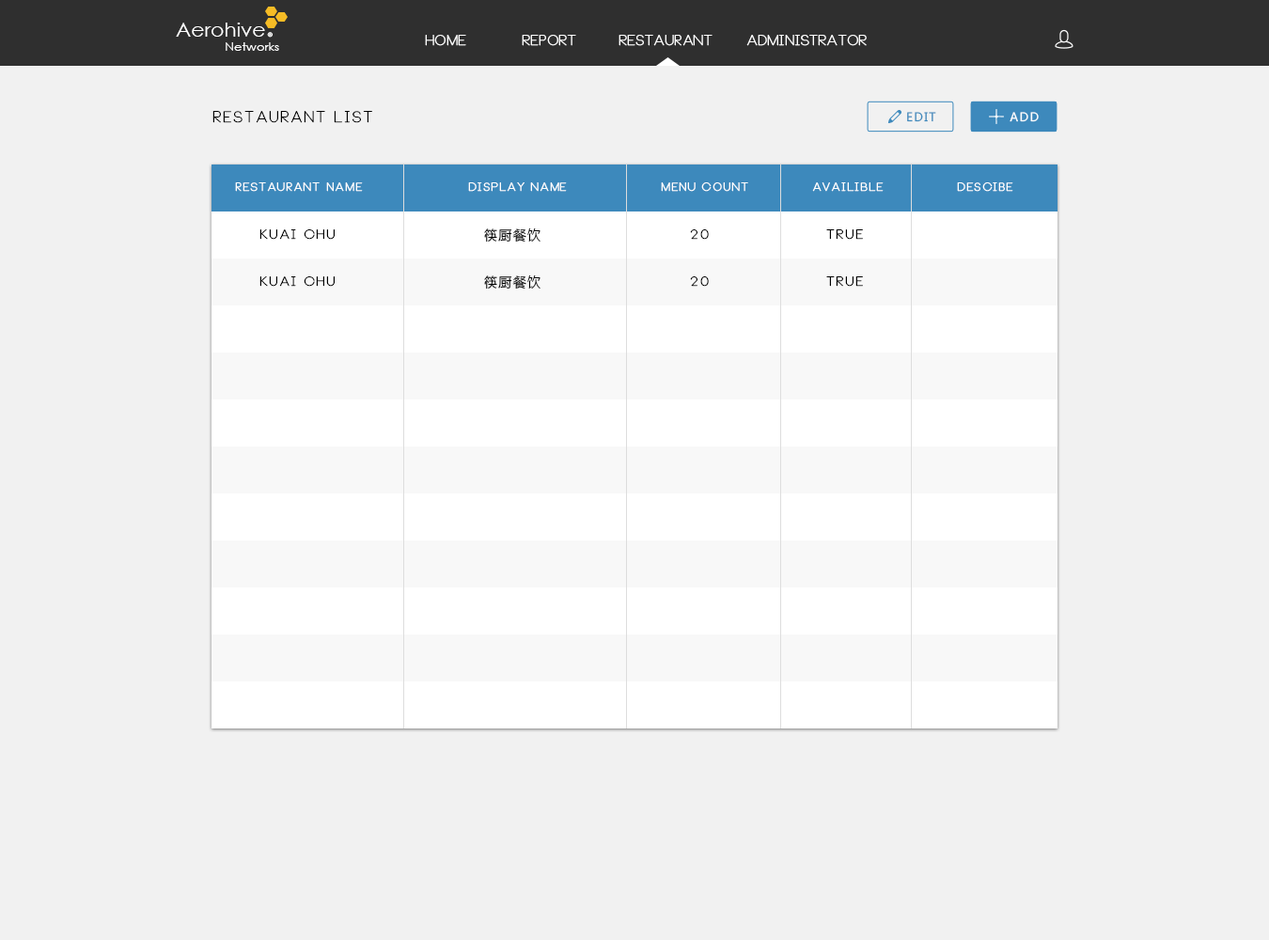
<style>
.page{position:relative;width:1269px;height:940px;background:#f1f1f1}
.page>*{position:absolute;margin:0}
.t1{font:19.3px "CenturyGothic";color:#ffffff;scale:1.07 1}
.t2{font:5.8px "CenturyGothic";color:#ffffff;scale:1.07 1}
.t3{font:14.1px "Neou-Thin";color:#ffffff;font-weight:bold}
.t4{font:11.6px "CenturyGothic";color:#ffffff;scale:1.07 1}
.t5{font:15px "Neou-Thin";letter-spacing:0.1em;color:#010101;font-weight:bold}
.t6{font:11.8px "MicrosoftYaHei";letter-spacing:0.1em;color:#3d89bc}
.t7{font:11.8px "MicrosoftYaHei";letter-spacing:0.1em;color:#feffff}
.t8{font:11.3px "Neou-Thin";letter-spacing:0.1em;color:#ffffff;font-weight:bold}
.t9{font:13.2px "Neou-Thin";letter-spacing:0.1em;color:#000000;font-weight:bold}
.t10{font:13.2px "MicrosoftYaHei";letter-spacing:0.1em;color:#000000}
</style>
<div class="page">
<p class="t1" style="left:176px;top:23px;width:89px;height:14px">Aerohive</p>
<p class="t2" style="left:267px;top:32px;width:6px;height:6px">®</p>
<p class="t3" style="left:425px;top:35px;width:41px;height:11px">Home</p>
<p class="t3" style="left:522px;top:35px;width:54px;height:11px">Report</p>
<p class="t3" style="left:618px;top:35px;width:94px;height:11px">Restaurant</p>
<p class="t3" style="left:746px;top:35px;width:121px;height:11px">Administrator</p>
<p class="t4" style="left:226px;top:42px;width:53px;height:9px">Networks</p>
<p class="t5" style="left:212px;top:111px;width:160px;height:12px">Restaurant List</p>
<p class="t6" style="left:907px;top:112px;width:29px;height:10px">EDIT</p>
<p class="t7" style="left:1009px;top:112px;width:30px;height:10px">ADD</p>
<p class="t7" style="left:1009px;top:112px;width:30px;height:10px">ADD</p>
<p class="t8" style="left:235px;top:182px;width:128px;height:10px">Restaurant name</p>
<p class="t8" style="left:468px;top:182px;width:99px;height:10px">display name</p>
<p class="t8" style="left:661px;top:182px;width:87px;height:10px">menu count</p>
<p class="t8" style="left:812px;top:182px;width:71px;height:10px">availible</p>
<p class="t8" style="left:957px;top:182px;width:56px;height:10px">descibe</p>
<p class="t9" style="left:259px;top:229px;width:76px;height:11px">Kuai Chu</p>
<p class="t10" style="left:484px;top:228px;width:56px;height:14px">筷厨餐饮</p>
<p class="t9" style="left:690px;top:229px;width:19px;height:11px">20</p>
<p class="t9" style="left:826px;top:229px;width:37px;height:11px">true</p>
<p class="t9" style="left:259px;top:276px;width:76px;height:11px">Kuai Chu</p>
<p class="t10" style="left:484px;top:275px;width:56px;height:14px">筷厨餐饮</p>
<p class="t9" style="left:690px;top:276px;width:19px;height:11px">20</p>
<p class="t9" style="left:826px;top:276px;width:37px;height:11px">true</p>
</div>
